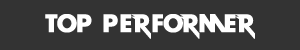
<style>
.page{position:relative;width:300px;height:50px;background:#333333}
.page>*{position:absolute;margin:0}
.t1{font:23.9px "ROCKBANDGAMEFONTV2-Bold";letter-spacing:0.05em;color:#ffffff;font-weight:bold}
</style>
<div class="page">
<p class="t1" style="left:45px;top:14px;width:210px;height:25px">TOP PERFORMER</p>
</div>
